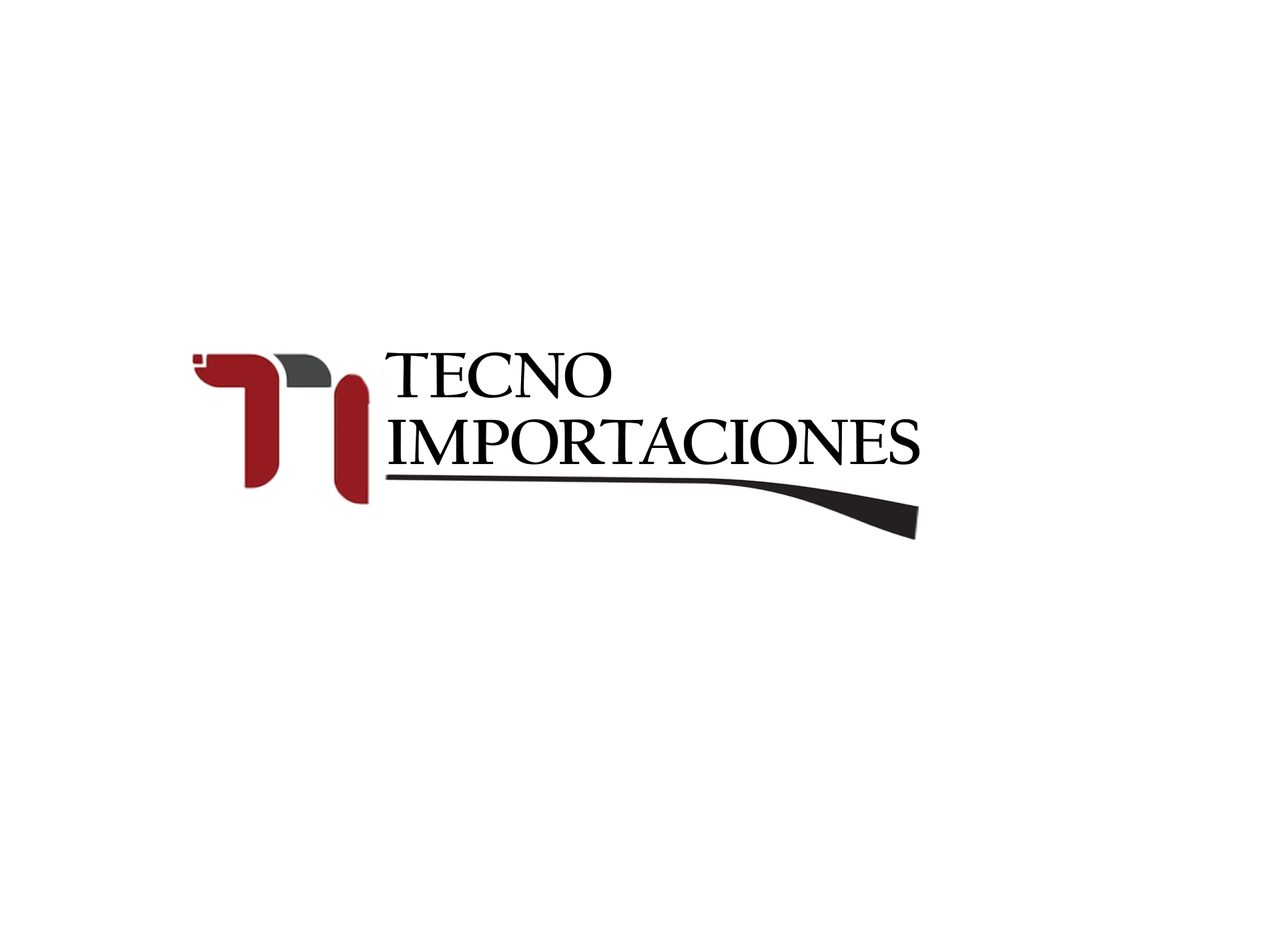
<style>
.page{position:relative;width:1261px;height:946px;background:#ffffff}
.page>*{position:absolute;margin:0}
.t1{font:66.7px/66.7px "CalifornianFB-Bold";letter-spacing:-0.005em;color:#000000}
</style>
<div class="page">
<p class="t1" style="left:385px;top:352px;width:535px;height:113px">TECNO <br>IMPORTACIONES</p>
</div>
